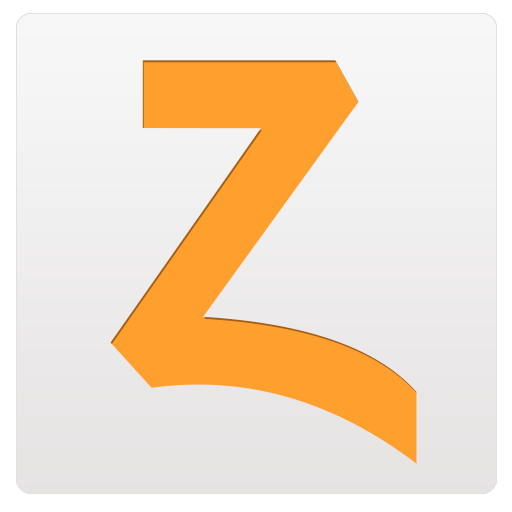
<style>
.page{position:relative;width:512px;height:512px}
.page>*{position:absolute;margin:0}
.t1{font:475px "KingthingsSans";color:#ff9f2d}
</style>
<div class="page">
<p class="t1" style="left:110px;top:60px;width:307px;height:404px">Z</p>
</div>
